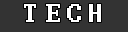
<style>
.page{position:relative;width:128px;height:32px;background:#333333}
.page>*{position:absolute;margin:0}
.t1{font:29.3px "Terminal";letter-spacing:0.2em;color:#ffffff}
</style>
<div class="page">
<p class="t1" style="left:24px;top:4px;width:77px;height:18px">TECH</p>
</div>
